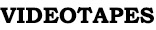
<style>
.page{position:relative;width:156px;height:30px;background:#ffffff}
.page>*{position:absolute;margin:0}
.t1{font:32px "BookmanOldStyle-Bold";color:#000000;font-variant:small-caps}
</style>
<div class="page">
<p class="t1" style="left:0px;top:7px;width:154px;height:17px">videotapes</p>
</div>
